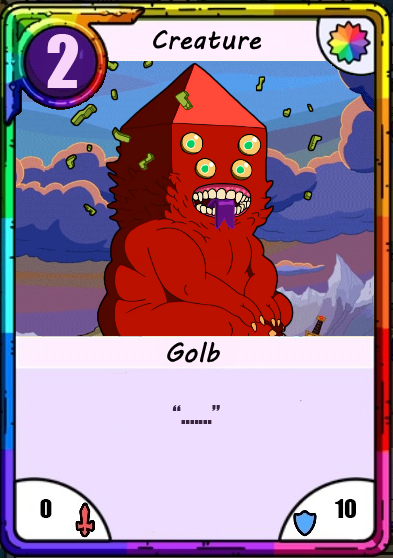
<style>
.page{position:relative;width:393px;height:558px}
.page>*{position:absolute;margin:0}
.t1{font:66.7px "Impact";color:#f8d4fa}
.t2{font:24px "Impact";color:#3b2440}
.t3{font:24px "Impact";color:#000000}
</style>
<div class="page">
<p class="t1" style="left:47px;top:34px;width:31px;height:54px">2</p>
<p class="t2" style="left:172px;top:405px;width:48px;height:19px">“.......”</p>
<p class="t3" style="left:40px;top:499px;width:12px;height:19px">0</p>
<p class="t3" style="left:335px;top:499px;width:21px;height:19px">10</p>
</div>
